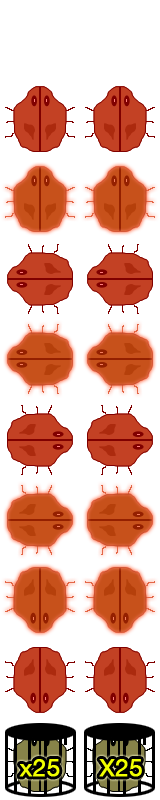
<style>
.page{position:relative;width:160px;height:800px;background:#ffffff}
.page>*{position:absolute;margin:0}
.t1{font:24px "HelveticaNeue";color:#f0ff00;font-weight:bold}
</style>
<div class="page">
<p class="t1" style="left:19px;top:759px;width:41px;height:18px">x25</p>
<p class="t1" style="left:99px;top:759px;width:43px;height:18px">X25</p>
</div>
